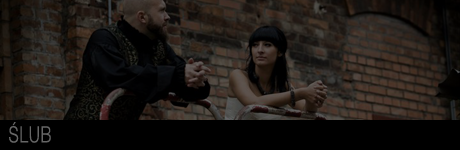
<style>
.page{position:relative;width:460px;height:150px;background:#000000}
.page>*{position:absolute;margin:0}
.t1{font:22.4px "HelveticaNeueCE-Light";letter-spacing:0.05em;color:#666666;scale:0.71 1}
</style>
<div class="page">
<p class="t1" style="left:9px;top:122px;width:42px;height:21px">ŚLUB</p>
</div>
